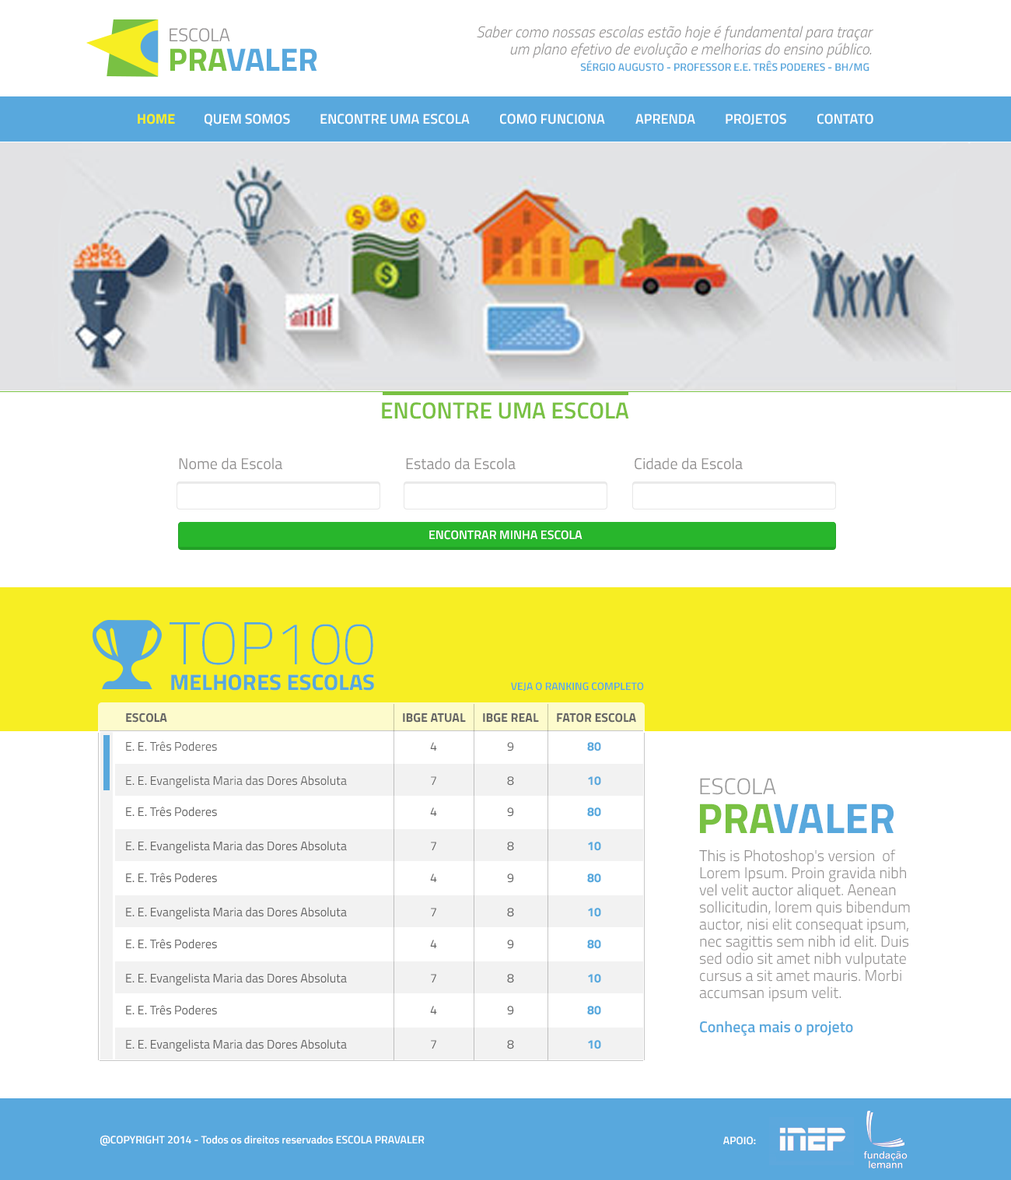
<style>
.page{position:relative;width:1011px;height:1180px;background:#ffffff}
.page>*{position:absolute;margin:0}
.t1{font:15.6px/17.1px "TitilliumWeb-LightItalic";color:#918f8f}
.t2{font:10.9px "TitilliumWeb-SemiBold";color:#58a8dd}
.t3{font:14px "TitilliumWeb-Bold";color:#f7ee23}
.t4{font:14px "TitilliumWeb-SemiBold";color:#ffffff}
.t5{font:23.1px "TitilliumWeb-SemiBold";color:#79c143}
.t6{font:15.6px "TitilliumWeb-Regular";color:#918f8f}
.t7{font:12.4px "TitilliumWeb-SemiBold";color:#ffffff;text-transform:uppercase}
.t8{font:59.9px "TitilliumWeb-Thin";color:#58a8dd}
.t9{font:22.3px "TitilliumWeb-Bold";color:#58a8dd}
.t10{font:12.4px "TitilliumWeb-Bold";color:#666666}
.t11{font:12.4px "TitilliumWeb-Regular";color:#666666}
.t12{font:12.4px "TitilliumWeb-Bold";color:#58a8dd}
.t13{font:22.6px "TitilliumWeb-Light";color:#999999}
.t14{font:42.6px "TitilliumWeb-Bold";color:#58a8dd}
.t15{font:42.6px "TitilliumWeb-Bold";color:#79c143}
.t16{font:15.6px/17.1px "TitilliumWeb-Light";color:#918f8f}
.t17{font:15.6px/17.1px "TitilliumWeb-SemiBold";color:#58a8dd}
.t18{font:10.9px "TitilliumWeb-SemiBold";color:#ffffff}
</style>
<div class="page">
<p class="t1" style="left:477px;top:26px;width:396px;height:32px;text-align:right">Saber como nossas escolas estão hoje é fundamental para traçar<br>um plano efetivo de evolução e melhorias do ensino público.</p>
<p class="t2" style="left:580px;top:60px;width:289px;height:12px">SÉRGIO AUGUSTO - PROFESSOR E.E. TRÊS PODERES - BH/MG</p>
<p class="t3" style="left:138px;top:114px;width:37px;height:10px">HOME</p>
<p class="t4" style="left:205px;top:114px;width:85px;height:12px">QUEM SOMOS</p>
<p class="t4" style="left:320px;top:114px;width:150px;height:10px">ENCONTRE UMA ESCOLA</p>
<p class="t4" style="left:500px;top:114px;width:105px;height:10px">COMO FUNCIONA</p>
<p class="t4" style="left:635px;top:114px;width:60px;height:10px">APRENDA</p>
<p class="t4" style="left:725px;top:114px;width:61px;height:11px">PROJETOS</p>
<p class="t4" style="left:817px;top:114px;width:56px;height:10px">CONTATO</p>
<p class="t5" style="left:382px;top:402px;width:247px;height:17px">ENCONTRE UMA ESCOLA</p>
<p class="t6" style="left:179px;top:457px;width:103px;height:13px">Nome da Escola</p>
<p class="t6" style="left:406px;top:457px;width:110px;height:13px">Estado da Escola</p>
<p class="t6" style="left:635px;top:457px;width:108px;height:13px">Cidade da Escola</p>
<p class="t7" style="left:429px;top:530px;width:153px;height:10px">Encontrar minha escola</p>
<p class="t8" style="left:170px;top:621px;width:203px;height:44px">TOP100</p>
<p class="t9" style="left:171px;top:674px;width:203px;height:17px">MELHORES ESCOLAS</p>
<p class="t2" style="left:511px;top:682px;width:133px;height:9px">VEJA O RANKING COMPLETO</p>
<p class="t10" style="left:126px;top:713px;width:41px;height:9px">ESCOLA</p>
<p class="t10" style="left:403px;top:713px;width:63px;height:9px">IBGE ATUAL</p>
<p class="t10" style="left:483px;top:713px;width:56px;height:9px">IBGE REAL</p>
<p class="t10" style="left:557px;top:713px;width:79px;height:9px">FATOR ESCOLA</p>
<p class="t11" style="left:126px;top:741px;width:91px;height:10px">E. E. Três Poderes</p>
<p class="t11" style="left:430px;top:742px;width:7px;height:8px">4</p>
<p class="t11" style="left:507px;top:742px;width:7px;height:9px">9</p>
<p class="t12" style="left:587px;top:742px;width:14px;height:9px">80</p>
<p class="t11" style="left:126px;top:775px;width:221px;height:13px">E. E. Evangelista Maria das Dores Absoluta</p>
<p class="t11" style="left:431px;top:776px;width:5px;height:9px">7</p>
<p class="t11" style="left:507px;top:776px;width:7px;height:9px">8</p>
<p class="t12" style="left:588px;top:776px;width:13px;height:9px">10</p>
<p class="t13" style="left:700px;top:778px;width:76px;height:17px">ESCOLA</p>
<p class="t14" style="left:700px;top:803px;width:193px;height:30px"><span class="t15">PRA</span>VALER</p>
<p class="t16" style="left:699px;top:849px;width:211px;height:187px">This is Photoshop's version  of Lorem Ipsum. Proin gravida nibh vel velit auctor aliquet. Aenean sollicitudin, lorem quis bibendum auctor, nisi elit consequat ipsum, nec sagittis sem nibh id elit. Duis sed odio sit amet nibh vulputate cursus a sit amet mauris. Morbi accumsan ipsum velit. <br><br><span class="t17">Conheça mais o projeto</span></p>
<p class="t18" style="left:100px;top:1135px;width:325px;height:10px">@COPYRIGHT 2014 - Todos os direitos reservados ESCOLA PRAVALER</p>
<p class="t18" style="left:723px;top:1136px;width:33px;height:9px">APOIO:</p>
</div>
